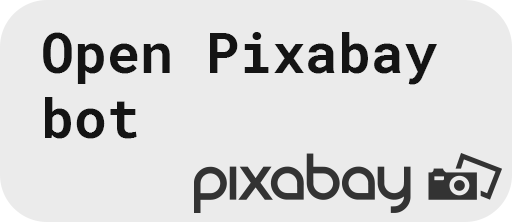
<style>
.page{position:relative;width:512px;height:222px;background:#ebebeb}
.page>*{position:absolute;margin:0}
.t1{font:55px/65px "RobotoMono-Bold";color:#141414}
</style>
<div class="page">
<p class="t1" style="left:43px;top:32px;width:394px;height:107px">Open Pixabay<br>bot</p>
</div>
